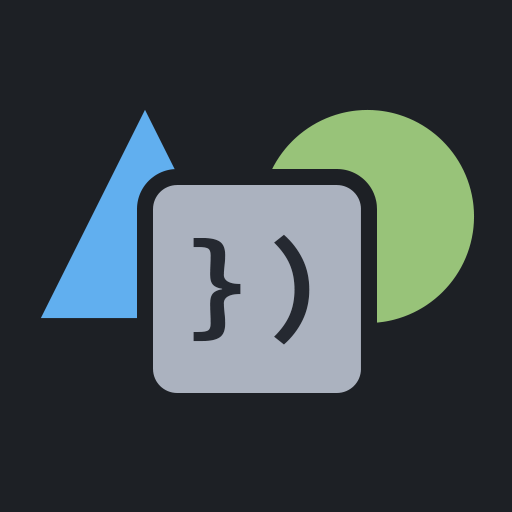
<style>
.page{position:relative;width:512px;height:512px;background:#1d2025}
.page>*{position:absolute;margin:0}
.t1{font:120px "SauceCodeProNFM-Bold";letter-spacing:0.05em;color:#252931}
</style>
<div class="page">
<p class="t1" style="left:193px;top:234px;width:117px;height:111px">})</p>
</div>
